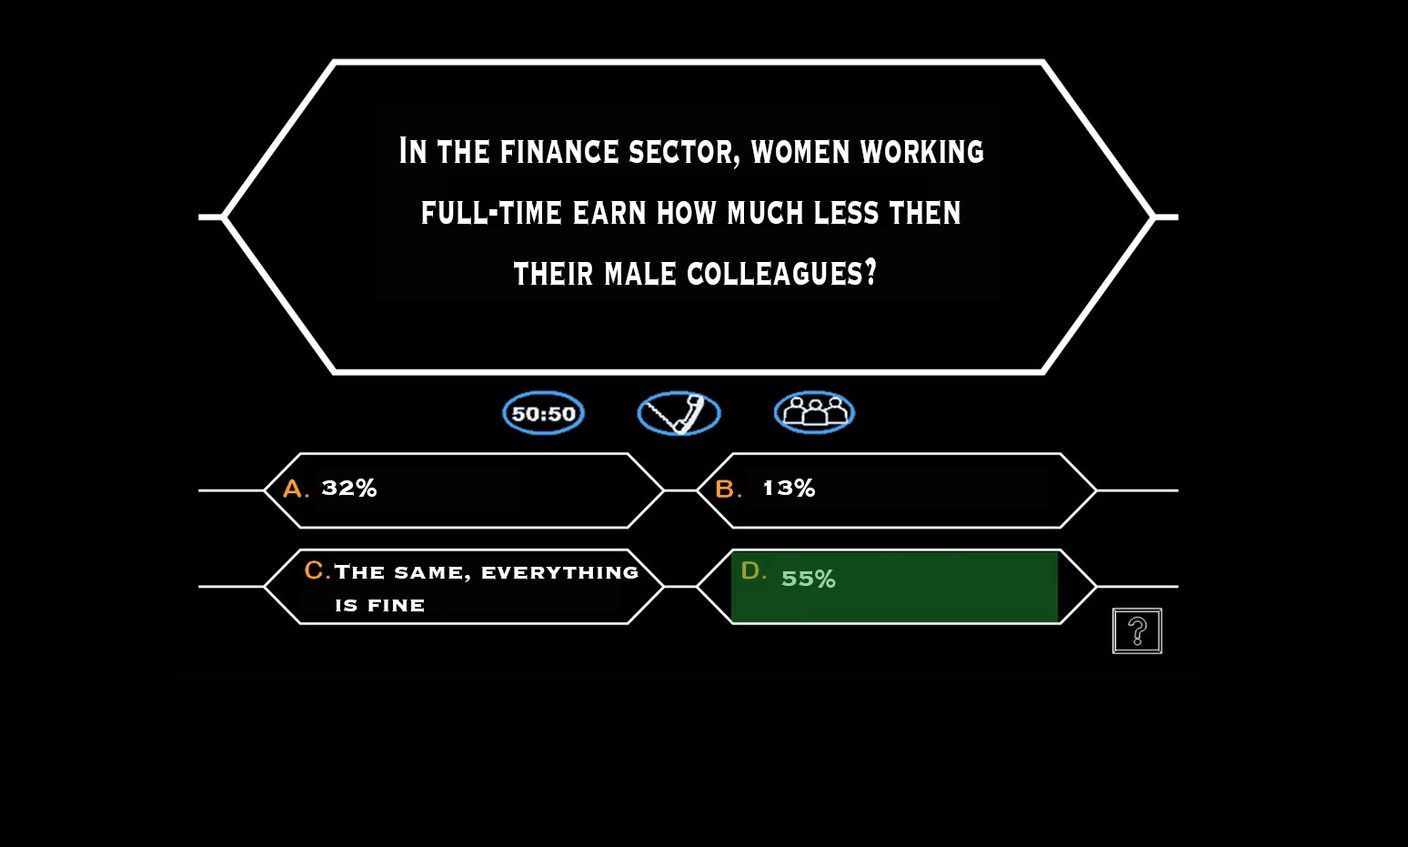
<style>
.page{position:relative;width:1408px;height:847px;background:#000002}
.page>*{position:absolute;margin:0}
.t1{font:51px "Copperplate-Bold";color:#ffffff;scale:0.57 1}
.t2{font:27.3px "Copperplate-Bold";color:#ffffff}
</style>
<div class="page">
<p class="t1" style="left:399px;top:136px;width:585px;height:150px;text-align:center">In the finance sector, women working <br>full-time earn how much less then <br>their male colleagues?</p>
<p class="t2" style="left:322px;top:478px;width:55px;height:19px">32%</p>
<p class="t2" style="left:764px;top:478px;width:51px;height:19px">13%</p>
<p class="t2" style="left:334px;top:563px;width:305px;height:49px">The same, everything <br>is fine</p>
</div>
